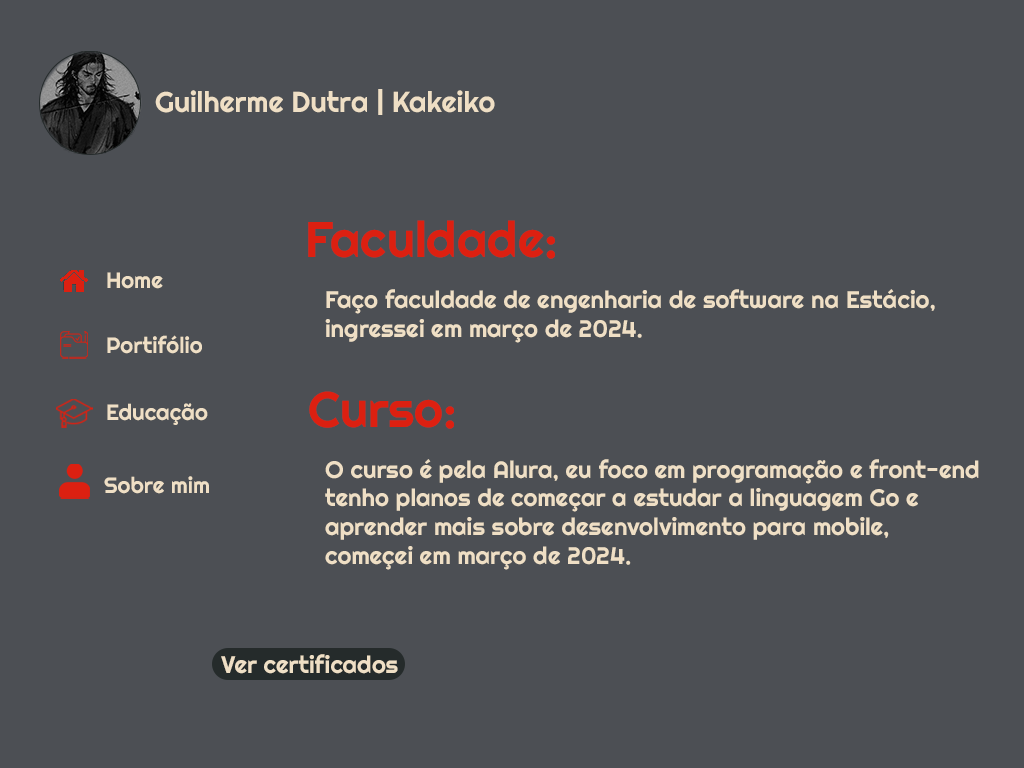
<style>
.page{position:relative;width:1024px;height:768px;background:#4c4f54}
.page>*{position:absolute;margin:0}
.t1{font:28.7px "Righteous-Regular";color:#efdfc5}
.t2{font:50px "Righteous-Regular";color:#dc2011}
.t3{font:22.3px "Righteous-Regular";color:#efdfc5}
.t4{font:24px "Righteous-Regular";color:#efdfc5}
</style>
<div class="page">
<p class="t1" style="left:155px;top:89px;width:340px;height:26px">Guilherme Dutra | Kakeiko</p>
<p class="t2" style="left:308px;top:220px;width:247px;height:39px">Faculdade:</p>
<p class="t3" style="left:107px;top:272px;width:56px;height:17px">Home</p>
<p class="t4" style="left:325px;top:289px;width:610px;height:54px">Faço faculdade de engenharia de software na Estácio,<br>ingressei em março de 2024.</p>
<p class="t3" style="left:107px;top:335px;width:95px;height:19px">Portifólio</p>
<p class="t2" style="left:309px;top:391px;width:145px;height:38px">Curso:</p>
<p class="t3" style="left:107px;top:403px;width:101px;height:22px">Educação</p>
<p class="t4" style="left:325px;top:459px;width:654px;height:111px">O curso é pela Alura, eu foco em programação e front-end<br>tenho planos de começar a estudar a linguagem Go e <br>aprender mais sobre desenvolvimento para mobile,<br>começei em março de 2024.</p>
<p class="t3" style="left:104px;top:476px;width:105px;height:18px">Sobre mim</p>
<p class="t4" style="left:221px;top:654px;width:177px;height:20px">Ver certificados</p>
</div>
